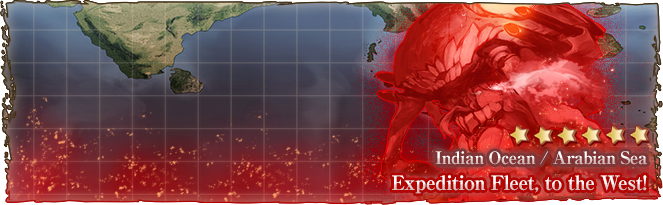
<style>
.page{position:relative;width:663px;height:205px}
.page>*{position:absolute;margin:0}
.t1{font:17px "RyuminPro-ExBold";letter-spacing:-0.04em}
.t2{font:20px "RyuminPro-ExBold";letter-spacing:-0.04em}
</style>
<div class="page">
<p class="t1" style="left:435px;top:151px;width:213px;height:14px">Indian Ocean / Arabian Sea</p>
<p class="t2" style="left:392px;top:175px;width:255px;height:19px">Expedition Fleet, to the West!</p>
</div>
